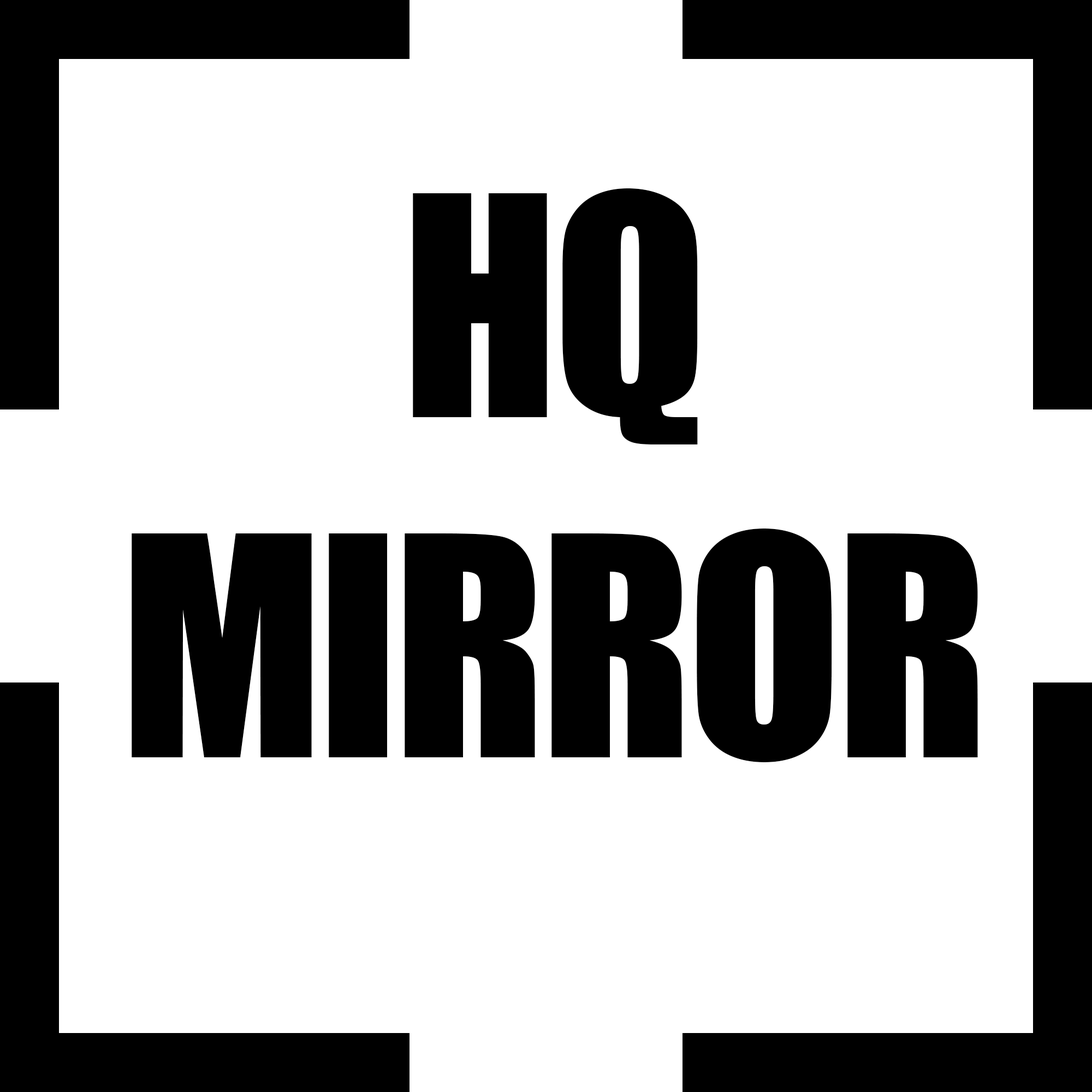
<style>
.page{position:relative;width:1092px;height:1092px;background:#ffffff}
.page>*{position:absolute;margin:0}
.t1{font:283.1px "Impact";letter-spacing:-0.02em;color:#000000}
</style>
<div class="page">
<p class="t1" style="left:132px;top:188px;width:846px;height:574px;text-align:center">HQ<br>MIRROR</p>
</div>
